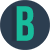
<style>
.page{position:relative;width:50px;height:50px;background:#2c3e50}
.page>*{position:absolute;margin:0}
.t1{font:48.8px "BebasNeue";color:#18bc9c}
</style>
<div class="page">
<p class="t1" style="left:16px;top:6px;width:18px;height:35px">B</p>
</div>
